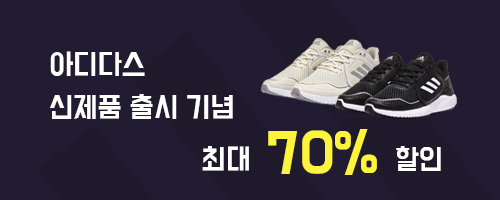
<style>
.page{position:relative;width:500px;height:200px;background:#211c32}
.page>*{position:absolute;margin:0}
.t1{font:25.2px "BMDoHyeon";color:#ffffff}
.t2{font:50.5px "BMDoHyeon";color:#fff43d}
</style>
<div class="page">
<p class="t1" style="left:50px;top:51px;width:95px;height:25px">아디다스</p>
<p class="t1" style="left:50px;top:94px;width:183px;height:25px">신제품 출시 기념</p>
<p class="t2" style="left:202px;top:129px;width:239px;height:46px"><span class="t1">최대 </span>70% <span class="t1">할인</span></p>
</div>
